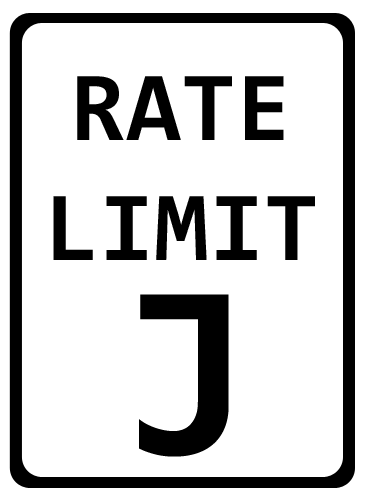
<style>
.page{position:relative;width:365px;height:502px;background:#ffffff}
.page>*{position:absolute;margin:0}
.t1{font:100px "Consolas-Bold";color:#000000}
.t2{font:250px "Consolas-Bold";color:#000000}
</style>
<div class="page">
<p class="t1" style="left:53px;top:76px;width:262px;height:184px;text-align:center">RATE<br>LIMIT</p>
<p class="t2" style="left:139px;top:294px;width:90px;height:163px">J</p>
</div>
